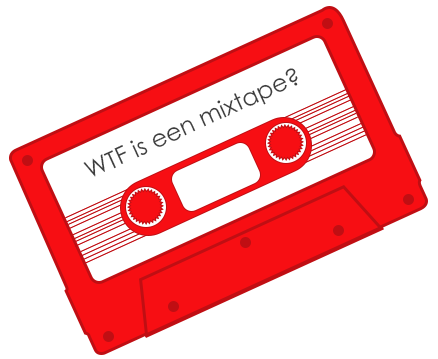
<style>
.page{position:relative;width:438px;height:359px;background:#ffffff}
.page>*{position:absolute;margin:0}
.t1{font:24px "CenturyGothic";color:#3e3e3e}
</style>
<div class="page">
<p class="t1" style="left:83px;top:68px;width:215px;height:109px;rotate:-25deg">WTF is een mixtape?</p>
</div>
